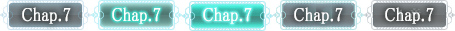
<style>
.page{position:relative;width:455px;height:31px}
.page>*{position:absolute;margin:0}
.t1{font:19px "MS-PMincho";color:#ffffff;font-weight:bold;scale:0.84 1}
</style>
<div class="page">
<p class="t1" style="left:22px;top:7px;width:49px;height:17px">Chap.7</p>
<p class="t1" style="left:112px;top:7px;width:49px;height:17px">Chap.7</p>
<p class="t1" style="left:203px;top:7px;width:49px;height:17px">Chap.7</p>
<p class="t1" style="left:294px;top:7px;width:49px;height:17px">Chap.7</p>
<p class="t1" style="left:385px;top:7px;width:49px;height:17px">Chap.7</p>
</div>
